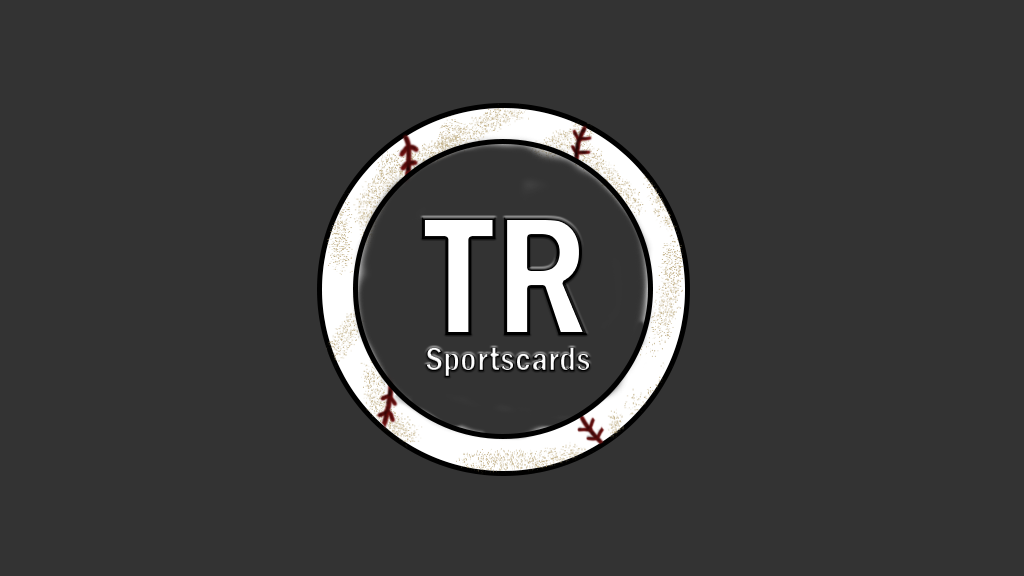
<style>
.page{position:relative;width:1024px;height:576px;background:#333333}
.page>*{position:absolute;margin:0}
.t1{font:176.5px "FranklinGothic-DemiCond";color:#ffffff}
.t2{font:36px "FranklinGothic-DemiCond"}
</style>
<div class="page">
<p class="t1" style="left:421px;top:217px;width:75px;height:118px">T</p>
<p class="t1" style="left:504px;top:217px;width:83px;height:118px">R</p>
<p class="t2" style="left:425px;top:347px;width:165px;height:30px">Sportscards</p>
</div>
